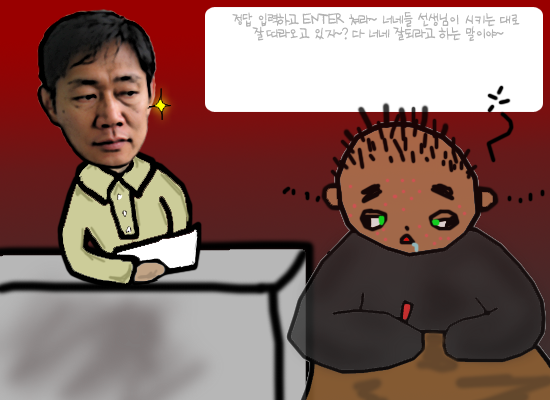
<style>
.page{position:relative;width:550px;height:400px}
.page>*{position:absolute;margin:0}
.t1{font:18px/14px "Na@Sanha";letter-spacing:-0.05em;color:#b2b2b2;scale:0.8 1}
</style>
<div class="page">
<p class="t1" style="left:232px;top:12px;width:288px;height:30px;text-align:center">정답 입력하고 ENTER 쳐라~ 너네들 선생님이 시키는 대로<br> 잘 따라오고 있지~? 다 너네 잘되라고 하는 말이야~</p>
</div>
